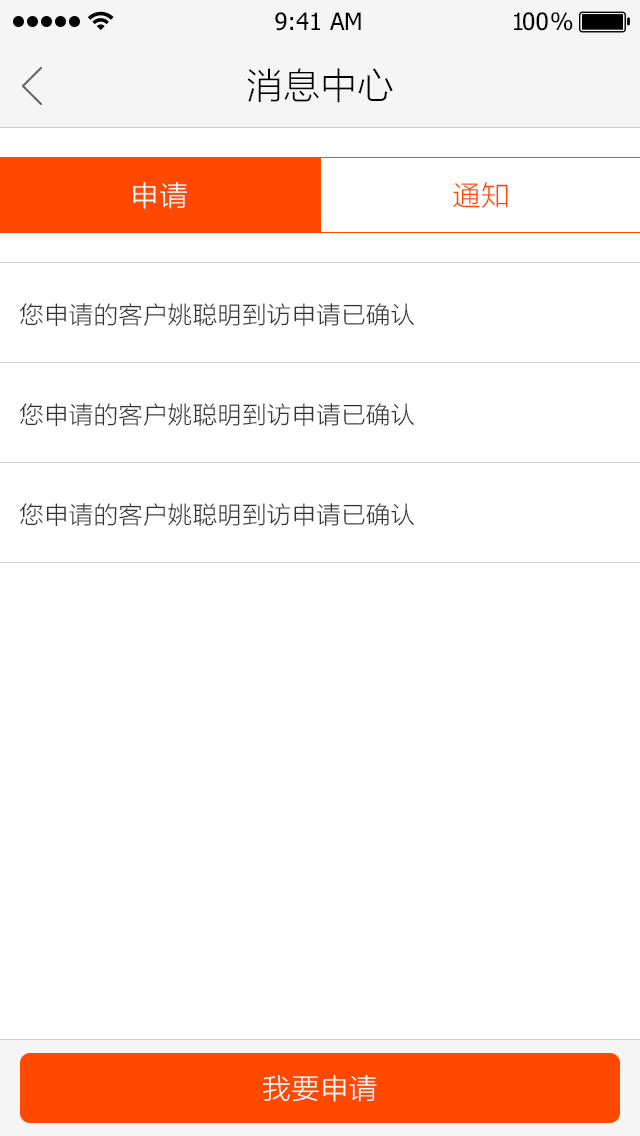
<style>
.page{position:relative;width:640px;height:1136px;background:#ffffff}
.page>*{position:absolute;margin:0}
.t1{font:24px "Tahoma";color:#000000}
.t2{font:24px "Tahoma";letter-spacing:-0.1em;color:#000000}
.t3{font:24px "Tahoma";letter-spacing:-0.25em;color:#000000}
.t4{font:36px "STHeitiSC-Light";color:#000000}
.t5{font:28px "STHeitiSC-Light";color:#ffffff}
.t6{font:28px "STHeitiSC-Light";color:#ff4800}
.t7{font:24px "STHeitiSC-Light";color:#333333}
</style>
<div class="page">
<p class="t1" style="left:275px;top:12px;width:86px;height:19px">9:41 AM</p>
<p class="t2" style="left:514px;top:12px;width:59px;height:19px">1<span class="t1">0</span><span class="t3">0 </span>%</p>
<p class="t4" style="left:247px;top:68px;width:146px;height:35px">消息中心</p>
<p class="t5" style="left:133px;top:182px;width:54px;height:27px">申请</p>
<p class="t6" style="left:453px;top:182px;width:55px;height:26px">通知</p>
<p class="t7" style="left:20px;top:303px;width:394px;height:24px">您申请的客户姚聪明到访申请已确认</p>
<p class="t7" style="left:20px;top:403px;width:394px;height:24px">您申请的客户姚聪明到访申请已确认</p>
<p class="t7" style="left:20px;top:503px;width:394px;height:24px">您申请的客户姚聪明到访申请已确认</p>
<p class="t5" style="left:263px;top:1074px;width:114px;height:28px">我要申请</p>
</div>
